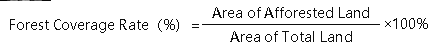
<style>
.page{position:relative;width:440px;height:51px;background:#ffffff}
.page>*{position:absolute;margin:0}
.t1{font:14px "MicrosoftYaHei";letter-spacing:-0.005em;color:#0d0d0d}
</style>
<div class="page">
<p class="t1" style="left:212px;top:7px;width:157px;height:11px">Area of Afforested Land</p>
<p class="t1" style="left:10px;top:19px;width:189px;height:14px">Forest Coverage Rate（%）＝</p>
<p class="t1" style="left:385px;top:18px;width:43px;height:11px">×100%</p>
<p class="t1" style="left:230px;top:31px;width:122px;height:11px">Area of Total Land</p>
</div>
